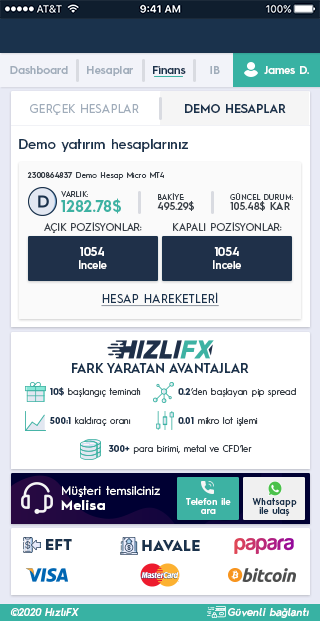
<style>
.page{position:relative;width:320px;height:621px;background:#ffffff}
.page>*{position:absolute;margin:0}
.t1{font:11.1px "HurmeGeometricSans3-SemiBold";color:#a1adbb}
.t2{font:11.1px "HurmeGeometricSans3-SemiBold";color:#1a324c}
.t3{font:11.1px "HurmeGeometricSans3-SemiBold";color:#fefefe}
.t4{font:12px "HurmeGeometricSans1-Regular";letter-spacing:0.01em;color:#a1adbb}
.t5{font:12px "HurmeGeometricSans1-SemiBold";letter-spacing:0.01em;color:#1a324c}
.t6{font:13.7px "HurmeGeometricSans3-SemiBold";letter-spacing:0.01em;color:#1a324c}
.t7{font:7.7px "HurmeGeometricSans1-Regular";letter-spacing:0.025em;color:#3a4149}
.t8{font:7.7px "HurmeGeometricSans1-SemiBold";letter-spacing:0.025em;color:#3a4149}
.t9{font:7.7px "HurmeGeometricSans1-Regular";letter-spacing:0.01em;color:#3a4149}
.t10{font:15.4px "HurmeGeometricSans1-Bold";letter-spacing:0.01em;color:#3db2a3}
.t11{font:7.7px/10.2px "HurmeGeometricSans1-Regular";letter-spacing:0.01em;color:#3a4149}
.t12{font:10.2px/10.2px "HurmeGeometricSans1-SemiBold";letter-spacing:0.01em;color:#3a4149}
.t13{font:10.2px "HurmeGeometricSans1-Regular";letter-spacing:0.01em;color:#3a4149}
.t14{font:10.2px "HurmeGeometricSans3-SemiBold";letter-spacing:0.01em;color:#ffffff}
.t15{font:12px "HurmeGeometricSans1-SemiBold";letter-spacing:0.01em;color:#ffffff}
.t16{font:12px "HurmeGeometricSans1-Regular";letter-spacing:0.01em;color:#1a324c;text-decoration:underline}
.t17{font:12.8px "HurmeGeometricSans1-SemiBold";color:#1a324c}
.t18{font:9px "HurmeGeometricSans1-Regular";color:#3a4149}
.t19{font:9px "HurmeGeometricSans1-Bold";color:#1a324c}
.t20{font:12px/15.4px "HurmeGeometricSans1-Regular";letter-spacing:0.025em;color:#ffffff}
.t21{font:13.7px/15.4px "HurmeGeometricSans1-Bold";letter-spacing:0.05em;color:#ffffff}
.t22{font:8.9px/8.9px "HurmeGeometricSans3-SemiBold";letter-spacing:0.01em;color:#ffffff}
.t23{font:8.9px/8.9px "HurmeGeometricSans3-SemiBold";letter-spacing:0.01em;color:#1a324c}
.t24{font:14.5px "HurmeGeometricSans1-Black";letter-spacing:0.025em;color:#1a324c}
.t25{font:10.2px "HurmeGeometricSans2-SemiBoldObl";letter-spacing:0.025em;color:#ffffff}
</style>
<div class="page">
<p class="t1" style="left:10px;top:66px;width:58px;height:8px">Dashboard</p>
<p class="t1" style="left:87px;top:66px;width:46px;height:10px">Hesaplar</p>
<p class="t2" style="left:153px;top:66px;width:33px;height:8px">Finans</p>
<p class="t1" style="left:210px;top:66px;width:10px;height:8px">IB</p>
<p class="t3" style="left:264px;top:66px;width:45px;height:8px">James D.</p>
<p class="t4" style="left:30px;top:104px;width:109px;height:11px">GERÇEK HESAPLAR</p>
<p class="t5" style="left:185px;top:104px;width:101px;height:9px">DEMO HESAPLAR</p>
<p class="t6" style="left:19px;top:139px;width:169px;height:13px">Demo yatırım hesaplarınız</p>
<p class="t7" style="left:27px;top:172px;width:137px;height:8px"><span class="t8">2300864837</span> Demo Hesap Micro MT4</p>
<p class="t9" style="left:61px;top:191px;width:27px;height:6px">VARLIK:</p>
<p class="t10" style="left:61px;top:198px;width:60px;height:16px">1282.78$</p>
<p class="t11" style="left:157px;top:193px;width:37px;height:18px">BAKİYE:<br><span class="t12">495.29$</span></p>
<p class="t11" style="left:230px;top:193px;width:63px;height:18px">GÜNCEL DURUM:<br><span class="t12">105.48$ KAR</span></p>
<p class="t13" style="left:44px;top:222px;width:98px;height:11px">AÇIK POZİSYONLAR:</p>
<p class="t13" style="left:173px;top:222px;width:109px;height:9px">KAPALI POZİSYONLAR:</p>
<p class="t14" style="left:79px;top:247px;width:28px;height:22px;text-align:center"><span class="t15">1054<br></span>İncele</p>
<p class="t14" style="left:213px;top:247px;width:28px;height:22px;text-align:center"><span class="t15">1054<br></span>İncele</p>
<p class="t16" style="left:101px;top:292px;width:118px;height:15px">HESAP HAREKETLERİ</p>
<p class="t17" style="left:72px;top:363px;width:177px;height:10px">FARK YARATAN AVANTAJLAR</p>
<p class="t18" style="left:50px;top:387px;width:91px;height:10px"><span class="t19">10$</span> başlangıç teminatı</p>
<p class="t18" style="left:178px;top:388px;width:118px;height:9px"><span class="t19">0.2</span>‘den başlayan pip spread</p>
<p class="t18" style="left:49px;top:417px;width:82px;height:9px"><span class="t19">500:1</span> kaldıraç oranı</p>
<p class="t18" style="left:178px;top:417px;width:80px;height:9px"><span class="t19">0.01</span> mikro lot işlemi</p>
<p class="t18" style="left:108px;top:445px;width:144px;height:9px"><span class="t19">300+</span> para birimi, metal ve CFD’ler</p>
<p class="t20" style="left:61px;top:486px;width:99px;height:24px">Müşteri temsilciniz<br><span class="t21">Melisa</span></p>
<p class="t22" style="left:186px;top:498px;width:45px;height:16px;text-align:center">Telefon ile<br>ara</p>
<p class="t23" style="left:252px;top:498px;width:45px;height:18px;text-align:center">Whatsapp<br>ile ulaş</p>
<p class="t24" style="left:46px;top:539px;width:26px;height:11px">EFT</p>
<p class="t24" style="left:142px;top:540px;width:58px;height:11px">HAVALE</p>
<p class="t25" style="left:10px;top:608px;width:69px;height:8px">©2020 HızlıFX</p>
<p class="t25" style="left:228px;top:608px;width:81px;height:10px">Güvenli bağlantı</p>
</div>
